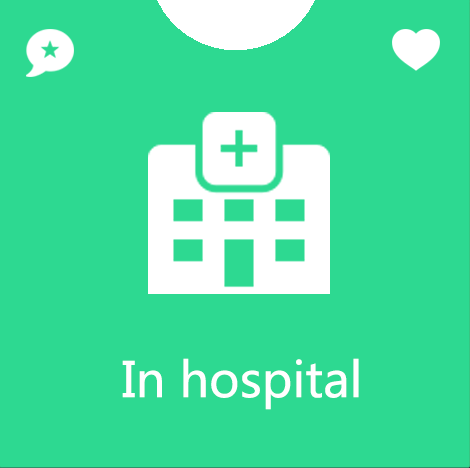
<style>
.page{position:relative;width:470px;height:468px;background:#2dd991}
.page>*{position:absolute;margin:0}
.t1{font:48px "MicrosoftYaHei";color:#ffffff}
</style>
<div class="page">
<p class="t1" style="left:122px;top:358px;width:237px;height:52px">In hospital</p>
</div>
